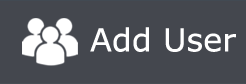
<style>
.page{position:relative;width:246px;height:84px;background:#44474e}
.page>*{position:absolute;margin:0}
.t1{font:31.7px "Verdana";color:#ffffff}
</style>
<div class="page">
<p class="t1" style="left:90px;top:27px;width:146px;height:25px">Add User</p>
</div>
